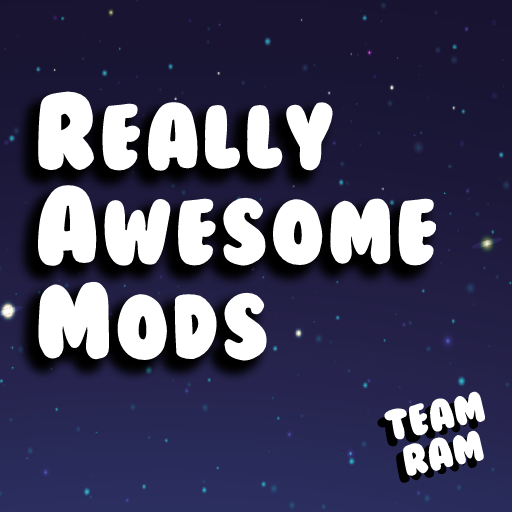
<style>
.page{position:relative;width:512px;height:512px}
.page>*{position:absolute;margin:0}
.t1{font:85px "BubbleGum";color:#ffffff}
.t2{font:100px "BubbleGum";color:#ffffff}
.t3{font:40px "BubbleGum";color:#ffffff}
</style>
<div class="page">
<p class="t1" style="left:37px;top:91px;width:400px;height:270px"><span class="t2">R </span>E A L LY<br><span class="t2">A </span>W E S O M E<br><span class="t2">M </span>O D S</p>
<p class="t3" style="left:383px;top:391px;width:103px;height:85px;text-align:center;rotate:-12deg">team<br>ram</p>
</div>
